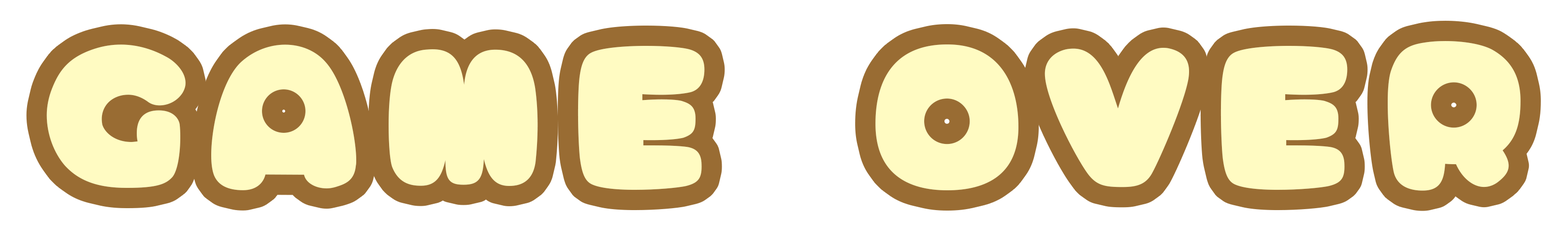
<style>
.page{position:relative;width:1568px;height:241px;background:#ffffff}
.page>*{position:absolute;margin:0}
.t1{font:201.4px "AmeChanPopMaruLight-Regular";letter-spacing:0.08em;color:#fffbc2}
</style>
<div class="page">
<p class="t1" style="left:46px;top:41px;width:1475px;height:150px">GAME OVER</p>
</div>
